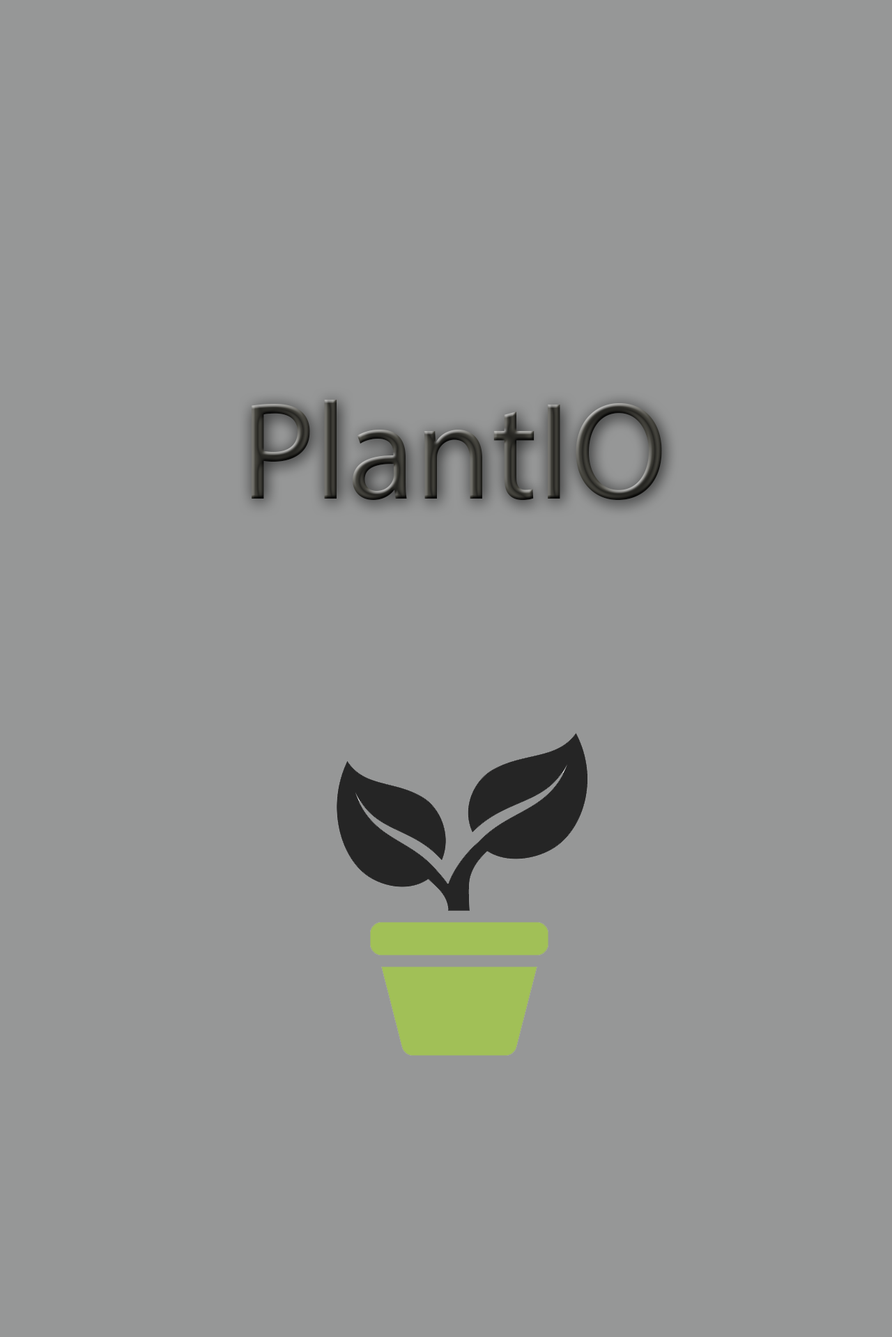
<style>
.page{position:relative;width:892px;height:1337px;background:#969797}
.page>*{position:absolute;margin:0}
.t1{font:139.3px "MyriadPro-Regular"}
</style>
<div class="page">
<p class="t1" style="left:251px;top:400px;width:411px;height:101px">PlantIO</p>
</div>
